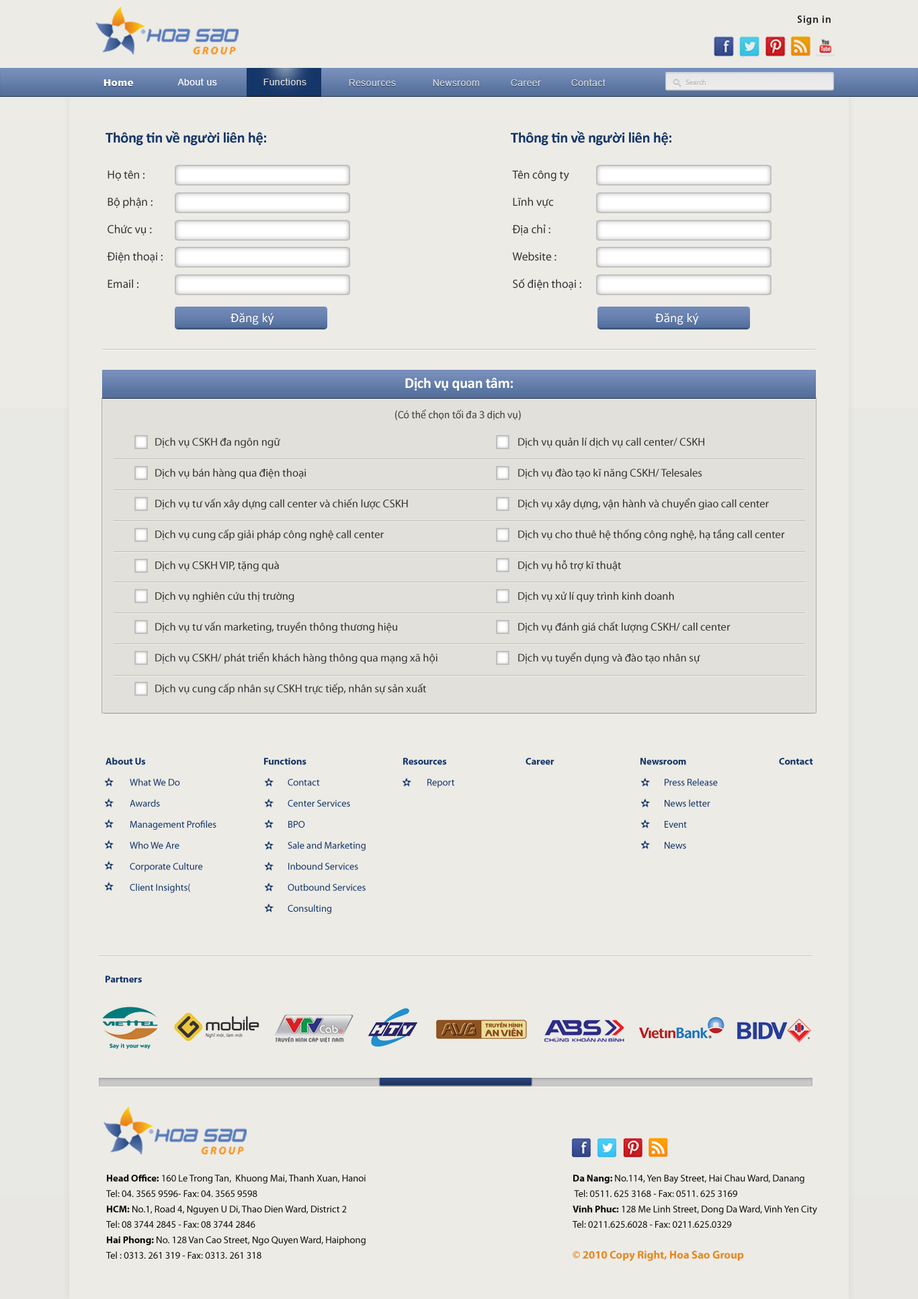
<style>
.page{position:relative;width:918px;height:1299px;background:#ecebe6}
.page>*{position:absolute;margin:0}
.t1{font:10.5px "MyriadPro-Semibold";letter-spacing:0.05em;color:#292929}
.t2{font:9.1px "ArialMT";letter-spacing:0.05em;color:#ffffff}
.t3{font:9.1px "ArialMT";letter-spacing:0.05em;color:#d8d7d7}
.t4{font:9.1px "Arial-Black";letter-spacing:0.05em;color:#ffffff}
.t5{font:7.3px "MyriadPro-Regular";color:#b3b3b3}
.t6{font:15.1px "Calibri-Bold";letter-spacing:-0.02em;color:#153669}
.t7{font:11.7px/27.3px "MyriadPro-Regular";color:#353535}
.t8{font:13.4px "Calibri";color:#ffffff}
.t9{font:15.1px "Calibri-Bold";letter-spacing:-0.02em;color:#fefefe}
.t10{font:11.2px "Calibri";letter-spacing:-0.02em;color:#4b4b4b}
.t11{font:11.2px/30.8px "MyriadPro-Regular";color:#363636}
.t12{font:9.8px/21px "MyriadPro-Regular";color:#153669}
.t13{font:9.8px/21px "MyriadPro-Bold";color:#153669}
.t14{font:9.8px "MyriadPro-Bold";color:#153669}
.t15{font:9.8px/15.4px "MyriadPro-Regular";color:#0f0f0f}
.t16{font:9.8px/15.4px "MyriadPro-Bold";color:#0f0f0f}
.t17{font:11.2px "MyriadPro-Bold";color:#e8871c}
</style>
<div class="page">
<p class="t1" style="left:797px;top:15px;width:34px;height:10px">Sign in</p>
<p class="t2" style="left:177px;top:78px;width:40px;height:7px">About us</p>
<p class="t3" style="left:263px;top:78px;width:44px;height:7px">Functions</p>
<p class="t4" style="left:104px;top:79px;width:30px;height:7px">Home</p>
<p class="t3" style="left:349px;top:79px;width:47px;height:7px">Resources</p>
<p class="t3" style="left:433px;top:79px;width:46px;height:7px">Newsroom</p>
<p class="t3" style="left:511px;top:79px;width:30px;height:7px">Career</p>
<p class="t3" style="left:571px;top:79px;width:35px;height:7px">Contact</p>
<p class="t5" style="left:686px;top:79px;width:20px;height:6px">Search</p>
<p class="t6" style="left:106px;top:131px;width:160px;height:14px">Thông tin về người liên hệ:</p>
<p class="t6" style="left:511px;top:131px;width:161px;height:14px">Thông tin về người liên hệ:</p>
<p class="t7" style="left:107px;top:170px;width:56px;height:118px">Họ tên : <br>Bộ phận : <br>Chức vụ : <br>Điện thoại : <br>Email :</p>
<p class="t7" style="left:512px;top:170px;width:69px;height:120px">Tên công ty <br>Lĩnh vực <br>Địa chỉ : <br>Website : <br>Số điện thoại :</p>
<p class="t8" style="left:231px;top:313px;width:43px;height:12px">Đăng ký</p>
<p class="t8" style="left:655px;top:313px;width:44px;height:12px">Đăng ký</p>
<p class="t9" style="left:405px;top:377px;width:108px;height:14px">Dịch vụ quan tâm:</p>
<p class="t10" style="left:395px;top:409px;width:126px;height:11px">(Có thể chọn tối đa 3 dịch vụ)</p>
<p class="t11" style="left:155px;top:437px;width:630px;height:257px">Dịch vụ CSKH đa ngôn ngữ          Dịch vụ quản lí dịch vụ call center/ CSKH<br>Dịch vụ bán hàng qua điện thoại         Dịch vụ đào tạo kĩ năng CSKH/ Telesales<br>Dịch vụ tư vấn xây dựng call center và chiến lược CSKH     Dịch vụ xây dựng, vận hành và chuyển giao call center<br>Dịch vụ cung cấp giải pháp công nghệ call center      Dịch vụ cho thuê hệ thống công nghệ, hạ tầng call center<br>Dịch vụ CSKH VIP, tặng quà          Dịch vụ hỗ trợ kĩ thuật<br>Dịch vụ nghiên cứu thị trường          Dịch vụ xử lí quy trình kinh doanh<br>Dịch vụ tư vấn marketing, truyền thông thương hiệu     Dịch vụ đánh giá chất lượng CSKH/ call center<br>Dịch vụ CSKH/ phát triển khách hàng thông qua mạng xã hội    Dịch vụ tuyển dụng và đào tạo nhân sự<br>Dịch vụ cung cấp nhân sự CSKH trực tiếp, nhân sự sản xuất</p>
<p class="t12" style="left:106px;top:757px;width:110px;height:136px"><span class="t13">About Us<br></span> What We Do <br> Awards <br> Management Profiles<br> Who We Are <br> Corporate Culture <br> Client Insights(</p>
<p class="t12" style="left:264px;top:758px;width:102px;height:155px"><span class="t13">Functions<br></span> Contact <br> Center Services <br> BPO <br> Sale and Marketing<br> Inbound Services <br> Outbound Services <br> Consulting</p>
<p class="t13" style="left:403px;top:758px;width:51px;height:30px">Resources<br><span class="t12"> Report</span></p>
<p class="t14" style="left:526px;top:758px;width:29px;height:7px">Career</p>
<p class="t12" style="left:641px;top:758px;width:77px;height:91px"><span class="t13">Newsroom<br></span> Press Release<br> News letter<br> Event<br> News</p>
<p class="t14" style="left:779px;top:758px;width:34px;height:7px">Contact</p>
<p class="t14" style="left:106px;top:975px;width:36px;height:8px">Partners</p>
<p class="t15" style="left:106px;top:1174px;width:260px;height:84px;text-align:justify"><span class="t16">Head Office:</span> 160 Le Trong Tan,  Khuong Mai, Thanh Xuan, Hanoi<br>Tel: 04. 3565 9596- Fax: 04. 3565 9598<br><span class="t16">HCM:</span> No.1, Road 4, Nguyen U Di, Thao Dien Ward, District 2 <br>Tel: 08 3744 2845 - Fax: 08 3744 2846 <br><span class="t16">Hai Phong:</span> No. 128 Van Cao Street, Ngo Quyen Ward, Haiphong<br>Tel : 0313. 261 319 - Fax: 0313. 261 318</p>
<p class="t15" style="left:573px;top:1174px;width:244px;height:53px;text-align:justify"><span class="t16">Da Nang: </span>No.114, Yen Bay Street, Hai Chau Ward, Danang<br> Tel: 0511. 625 3168 - Fax: 0511. 625 3169<br><span class="t16">Vinh Phuc:</span> 128 Me Linh Street, Dong Da Ward, Vinh Yen City<br>Tel: 0211.625.6028 - Fax: 0211.625.0329</p>
<p class="t17" style="left:573px;top:1250px;width:171px;height:11px">© 2010 Copy Right, Hoa Sao Group</p>
</div>
